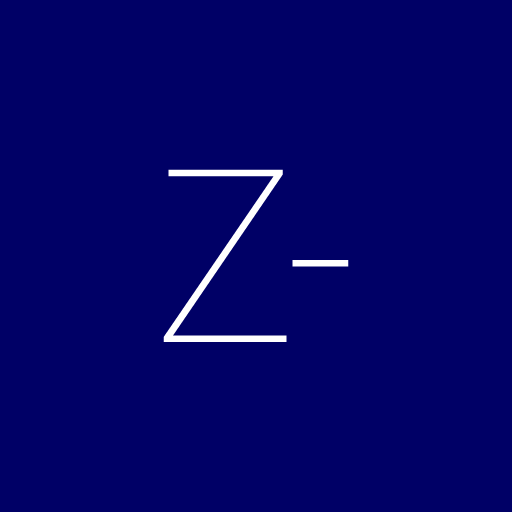
<style>
.page{position:relative;width:512px;height:512px;background:#000066}
.page>*{position:absolute;margin:0}
.t1{font:242px "Roboto-Thin";letter-spacing:-0.05em;color:#ffffff}
</style>
<div class="page">
<p class="t1" style="left:163px;top:169px;width:186px;height:173px">Z-</p>
</div>
